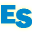
<style>
.page{position:relative;width:32px;height:32px;background:#0088cc}
.page>*{position:absolute;margin:0}
.t1{font:26.9px/4.2px "FranklinGothic-Heavy";letter-spacing:0.02em;color:#0088cc;font-weight:bold}
</style>
<div class="page">
<p class="t1" style="left:1px;top:5px;width:32px;height:23px">E<br>  S</p>
</div>
